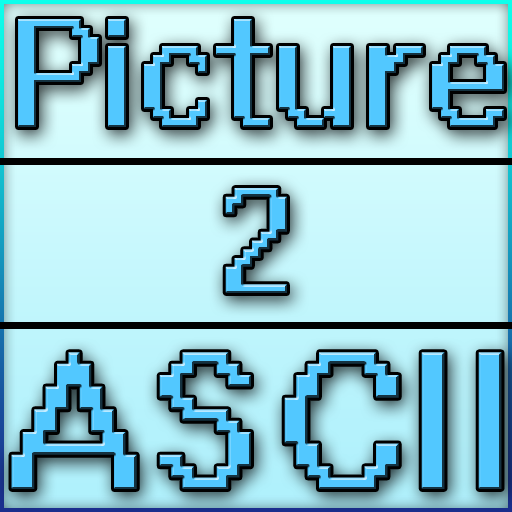
<style>
.page{position:relative;width:512px;height:512px}
.page>*{position:absolute;margin:0}
.t1{font:143.8px "System";color:#52c8ff}
.t2{font:182.3px "System";color:#52c8ff}
</style>
<div class="page">
<p class="t1" style="left:18px;top:19px;width:486px;height:108px">Picture</p>
<p class="t2" style="left:11px;top:352px;width:491px;height:137px">ASCII</p>
</div>
